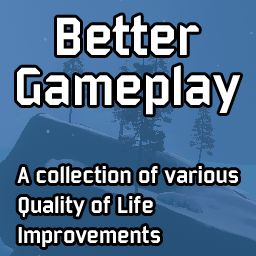
<style>
.page{position:relative;width:256px;height:256px}
.page>*{position:absolute;margin:0}
.t1{font:58.3px/50px "Bombardier";color:#ffffff}
.t2{font:25px "Bombardier";color:#ffffff}
</style>
<div class="page">
<p class="t1" style="left:17px;top:15px;width:224px;height:100px;text-align:center">Better<br>Gameplay</p>
<p class="t2" style="left:17px;top:166px;width:221px;height:81px">A collection of various<br>Quality of Life<br>Improvements</p>
</div>
